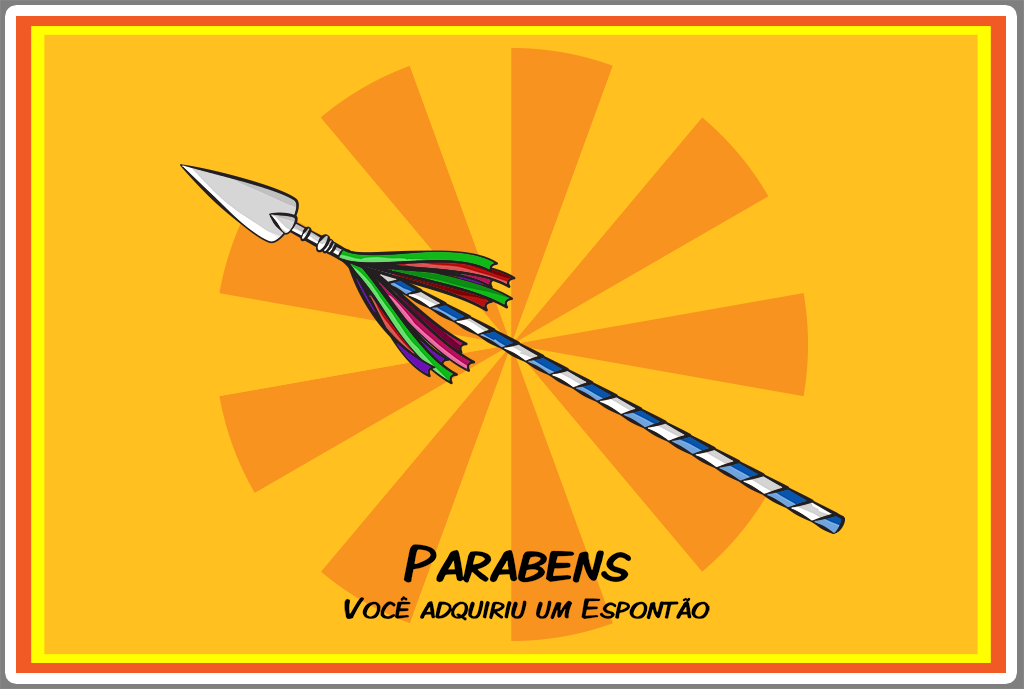
<style>
.page{position:relative;width:1024px;height:689px;background:#ffc020}
.page>*{position:absolute;margin:0}
.t1{font:29.5px/37.6px "KomikaDisplayKaps";color:#000000}
.t2{font:53.2px/37.6px "KomikaDisplayKaps";color:#000000}
</style>
<div class="page">
<p class="t1" style="left:344px;top:544px;width:366px;height:77px;text-align:center"><span class="t2">Parabens <br></span>Você adquiriu um Espontão</p>
</div>
